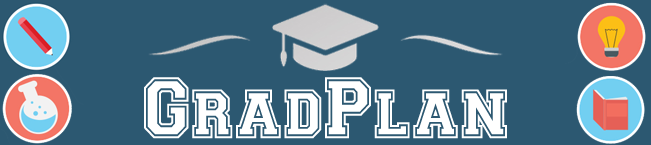
<style>
.page{position:relative;width:651px;height:145px;background:#2c5871}
.page>*{position:absolute;margin:0}
.t1{font:81.9px "CollegiateHeavyOutline-Medium";color:#ffffff}
</style>
<div class="page">
<p class="t1" style="left:144px;top:77px;width:363px;height:62px">GradPlan</p>
</div>
